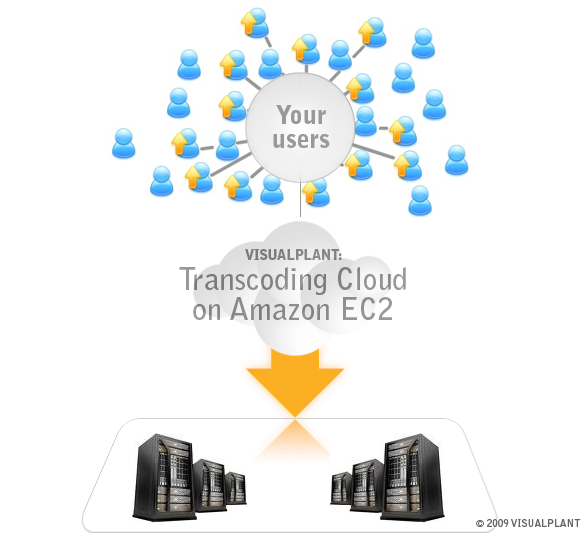
<style>
.page{position:relative;width:585px;height:545px;background:#ffffff}
.page>*{position:absolute;margin:0}
.t1{font:25px/24px "BellGothic-Black";color:#999999}
.t2{font:30px/30px "BellGothic-Bold";color:#999999}
.t3{font:14px/30px "BellGothic-Black";letter-spacing:-0.02em;color:#999999}
.t4{font:10px "BellGothic-Bold";color:#666666}
</style>
<div class="page">
<p class="t1" style="left:273px;top:105px;width:57px;height:43px;text-align:center">Your<br>users</p>
<p class="t2" style="left:179px;top:249px;width:227px;height:71px;text-align:center"><span class="t3">VISUALPLANT:<br></span>Transcoding Cloud<br>on Amazon EC2</p>
<p class="t4" style="left:476px;top:519px;width:105px;height:8px">© 2009 VISUALPLANT</p>
</div>
